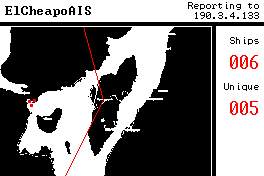
<style>
.page{position:relative;width:264px;height:176px;background:#000000}
.page>*{position:absolute;margin:0}
.t1{font:13px "Terminal";color:#000000}
.t2{font:8px "Terminal";color:#000000}
.t3{font:20px "Terminal";color:#ff0000}
</style>
<div class="page">
<p class="t1" style="left:5px;top:6px;width:86px;height:11px">ElCheapoAIS</p>
<p class="t2" style="left:188px;top:2px;width:71px;height:17px;text-align:right">Reporting to<br>190.3.4.133</p>
<p class="t2" style="left:224px;top:37px;width:35px;height:78px;text-align:right">Ships<br><span class="t3">006<br></span><br>Unique<br><span class="t3">005</span></p>
</div>
